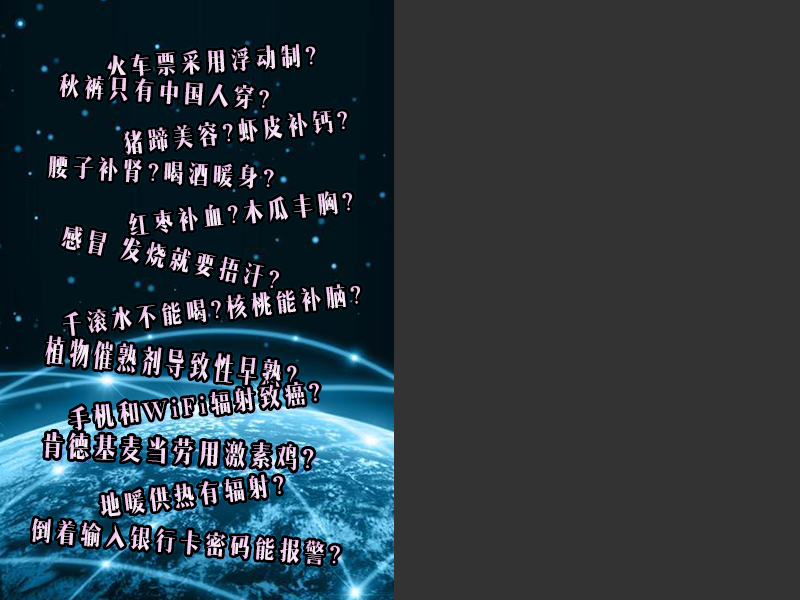
<style>
.page{position:relative;width:800px;height:600px;background:#333333}
.page>*{position:absolute;margin:0}
.t1{font:24px "MFLangSong_Noncommercial-Regular";letter-spacing:0.2em;color:#f4d6f3}
.t2{font:24px "MFLangSong_Noncommercial-Regular";letter-spacing:0.2em;color:#f3d1f2}
.t3{font:24px "MFLangSong_Noncommercial-Regular";letter-spacing:0.2em;color:#f4d7f3}
.t4{font:23.8px "MFLangSong_Noncommercial-Regular";letter-spacing:0.2em;color:#f4d6f3}
.t5{font:24px "MFLangSong_Noncommercial-Regular";letter-spacing:0.2em;color:#f4d8f4}
.t6{font:24px "MFLangSong_Noncommercial-Regular";letter-spacing:0.2em;color:#f4d5f3}
.t7{font:24px "MFLangSong_Noncommercial-Regular";letter-spacing:0.2em;color:#f5d8f4}
.t8{font:28.8px "MFLangSong_Noncommercial-Regular";letter-spacing:0.2em;color:#f4d6f3;scale:0.81 1}
.t9{font:23.8px "MFLangSong_Noncommercial-Regular";letter-spacing:0.2em;color:#f5daf4}
.t10{font:26.3px "MFLangSong_Noncommercial-Regular";letter-spacing:0.2em;color:#f4d6f3;scale:0.95 1}
.t11{font:24px "MFLangSong_Noncommercial-Regular";letter-spacing:0.2em;color:#f5d9f4}
.t12{font:24px "MFLangSong_Noncommercial-Regular";letter-spacing:0.2em;color:#f4d4f3}
</style>
<div class="page">
<p class="t1" style="left:107px;top:44px;width:209px;height:36px;rotate:-4deg">火车票采用浮动制?</p>
<p class="t2" style="left:59px;top:73px;width:210px;height:36px;rotate:4deg">秋裤只有中国人穿?</p>
<p class="t3" style="left:124px;top:110px;width:223px;height:45px;rotate:-6deg">猪蹄美容?虾皮补钙?</p>
<p class="t4" style="left:48px;top:156px;width:226px;height:33px;rotate:3deg">腰子补肾?喝酒暖身?</p>
<p class="t5" style="left:129px;top:191px;width:223px;height:46px;rotate:-6deg">红枣补血?木瓜丰胸?</p>
<p class="t6" style="left:61px;top:226px;width:218px;height:62px;rotate:12deg">感冒 发烧就要捂汗?</p>
<p class="t7" style="left:63px;top:284px;width:297px;height:52px;rotate:-6deg">千滚水不能喝?核桃能补脑?</p>
<p class="t8" style="left:45px;top:335px;width:252px;height:54px;rotate:6deg">植物催熟剂导致性早熟?</p>
<p class="t9" style="left:70px;top:381px;width:249px;height:50px;rotate:-6deg">手机和WiFi辐射致癌?</p>
<p class="t10" style="left:44px;top:432px;width:270px;height:39px;rotate:3deg">肯德基麦当劳用激素鸡?</p>
<p class="t10" style="left:44px;top:432px;width:270px;height:39px;rotate:3deg">肯德基麦当劳用激素鸡?</p>
<p class="t11" style="left:100px;top:474px;width:183px;height:43px;rotate:-7deg">地暖供热有辐射?</p>
<p class="t12" style="left:32px;top:518px;width:308px;height:47px;rotate:5deg">倒着输入银行卡密码能报警?</p>
</div>
